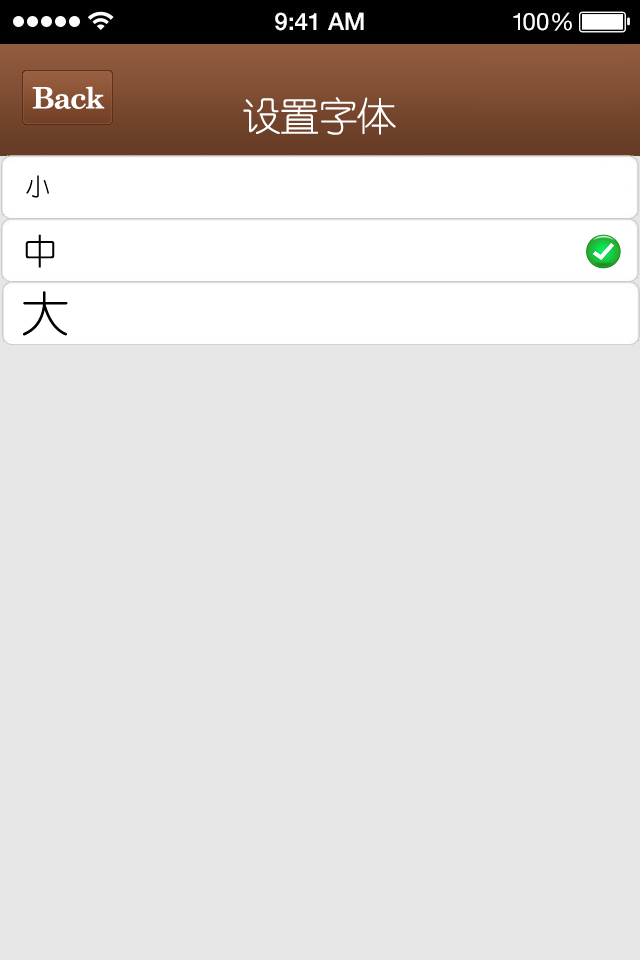
<style>
.page{position:relative;width:640px;height:960px;background:#e6e6e6}
.page>*{position:absolute;margin:0}
.t1{font:29.3px "CenturySchoolbook-Bold";letter-spacing:-0.04em;color:#ffffff}
.t2{font:40px "YouYuan";letter-spacing:-0.04em;color:#fffefe}
.t3{font:24px "YouYuan";letter-spacing:-0.04em;color:#000000}
.t4{font:36px "YouYuan";letter-spacing:-0.04em;color:#000000}
.t5{font:48px "YouYuan";letter-spacing:-0.04em;color:#000000}
</style>
<div class="page">
<p class="t1" style="left:32px;top:86px;width:73px;height:23px">Back</p>
<p class="t2" style="left:243px;top:97px;width:153px;height:38px">设置字体</p>
<p class="t3" style="left:26px;top:175px;width:23px;height:23px">小</p>
<p class="t4" style="left:25px;top:234px;width:30px;height:34px">中</p>
<p class="t5" style="left:23px;top:291px;width:45px;height:45px">大</p>
</div>
